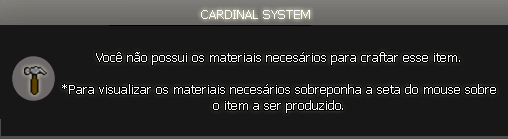
<style>
.page{position:relative;width:508px;height:139px;background:#171717}
.page>*{position:absolute;margin:0}
.t1{font:13.3px "Tahoma";color:#ffffff}
</style>
<div class="page">
<p class="t1" style="left:201px;top:10px;width:109px;height:9px">CARDINAL SYSTEM</p>
<p class="t1" style="left:62px;top:52px;width:434px;height:61px;text-align:center">Você não possui os materiais necesários para craftar esse item.<br><br>*Para visualizar os materiais necesários sobreponha a seta do mouse sobre o item a ser produzido.</p>
</div>
